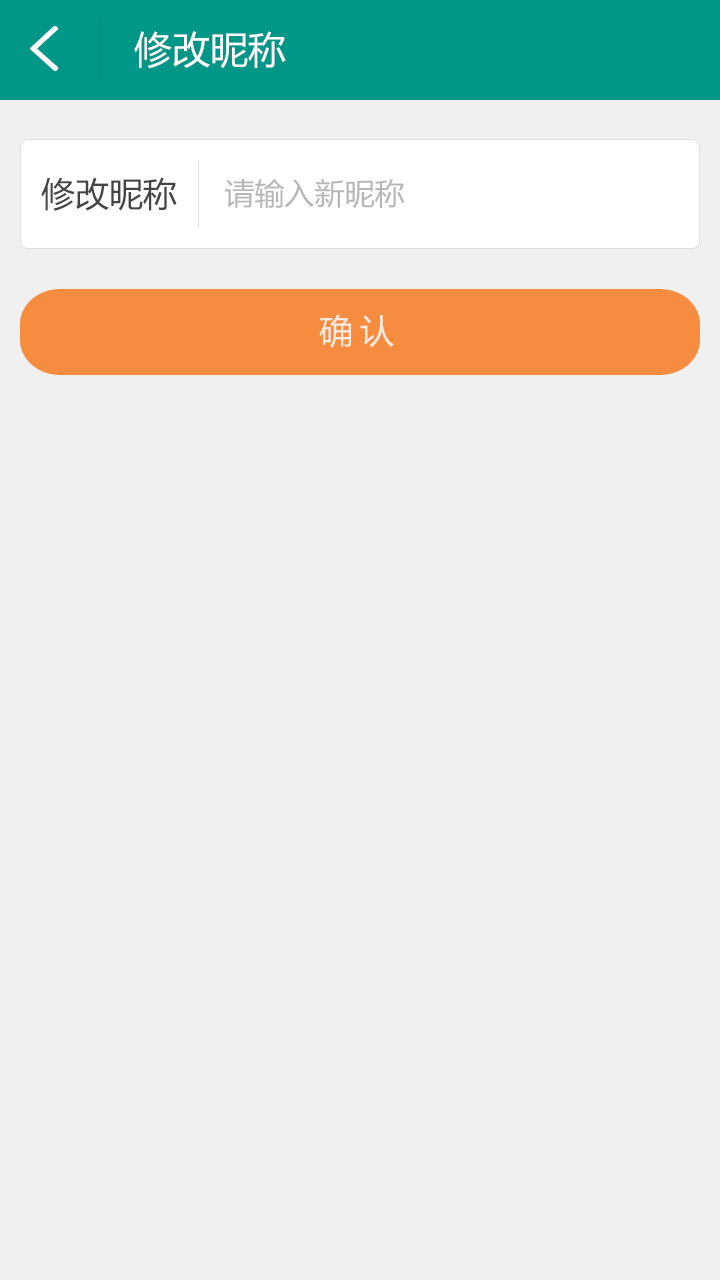
<style>
.page{position:relative;width:720px;height:1280px;background:#f0f0f0}
.page>*{position:absolute;margin:0}
.t1{font:62px "SimHei";color:#ffffff;font-weight:bold}
.t2{font:38px "MicrosoftYaHei";color:#ffffff}
.t3{font:34px "MicrosoftYaHei";color:#444444}
.t4{font:30px "MicrosoftYaHei";color:#b6b6b6}
.t5{font:34px "MicrosoftYaHei";letter-spacing:0.2em;color:#fdebe2}
</style>
<div class="page">
<p class="t1" style="left:30px;top:26px;width:29px;height:45px">&lt;</p>
<p class="t2" style="left:134px;top:31px;width:152px;height:38px">修改昵称</p>
<p class="t3" style="left:41px;top:177px;width:136px;height:34px">修改昵称</p>
<p class="t4" style="left:225px;top:178px;width:180px;height:31px">请输入新昵称</p>
<p class="t5" style="left:319px;top:314px;width:75px;height:34px">确认</p>
</div>
